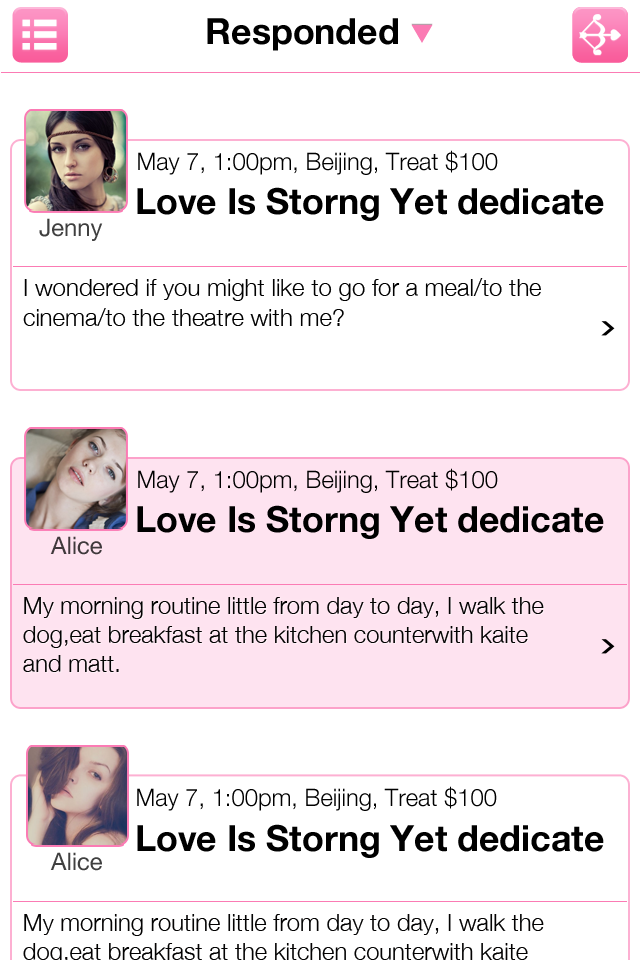
<style>
.page{position:relative;width:640px;height:960px;background:#ffffff}
.page>*{position:absolute;margin:0}
.t1{font:36px "HelveticaNeue-Bold";color:#000000}
.t2{font:24px "HelveticaNeue-Light";color:#000000}
.t3{font:24px "HelveticaNeue";color:#404040}
.t4{font:24px/6px "HelveticaNeue-Light";color:#000000}
.t5{font:24px "HelveticaNeue";color:#40393c}
.t6{font:24px "HelveticaNeue-Light";color:#040404}
</style>
<div class="page">
<p class="t1" style="left:207px;top:18px;width:191px;height:33px">Responded</p>
<p class="t2" style="left:138px;top:150px;width:360px;height:25px">May 7, 1:00pm, Beijing, Treat $100</p>
<p class="t1" style="left:137px;top:187px;width:467px;height:34px">Love Is Storng Yet dedicate</p>
<p class="t3" style="left:39px;top:218px;width:64px;height:23px">Jenny</p>
<p class="t4" style="left:23px;top:278px;width:518px;height:48px">I wondered if you might like to go for a meal/to the <br><br><br><br><br>cinema/to the theatre with me?</p>
<p class="t2" style="left:138px;top:468px;width:360px;height:25px">May 7, 1:00pm, Beijing, Treat $100</p>
<p class="t1" style="left:137px;top:505px;width:467px;height:34px">Love Is Storng Yet dedicate</p>
<p class="t5" style="left:50px;top:536px;width:52px;height:19px">Alice</p>
<p class="t6" style="left:23px;top:597px;width:521px;height:75px">My morning routine little from day to day, I walk the <br>dog,eat breakfast at the kitchen counterwith kaite <br>and matt.</p>
<p class="t2" style="left:137px;top:786px;width:360px;height:25px">May 7, 1:00pm, Beijing, Treat $100</p>
<p class="t1" style="left:137px;top:824px;width:467px;height:34px">Love Is Storng Yet dedicate</p>
<p class="t3" style="left:50px;top:852px;width:52px;height:19px">Alice</p>
</div>
